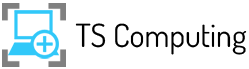
<style>
.page{position:relative;width:249px;height:69px;background:#ffffff}
.page>*{position:absolute;margin:0}
.t1{font:32px "Dosis-Regular";color:#000000}
</style>
<div class="page">
<p class="t1" style="left:75px;top:23px;width:172px;height:32px">TS Computing</p>
</div>
